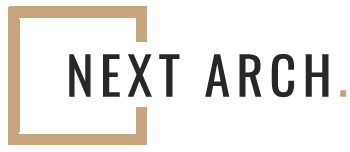
<style>
.page{position:relative;width:350px;height:152px;background:#ffffff}
.page>*{position:absolute;margin:0}
.t1{font:52px "Oswald-Regular";letter-spacing:0.12em;color:#272727}
.t2{font:52px "Oswald-Regular";letter-spacing:0.12em;color:#c5a47e}
</style>
<div class="page">
<p class="t1" style="left:69px;top:54px;width:278px;height:44px">NEXT ARCH<span class="t2">.</span></p>
</div>
